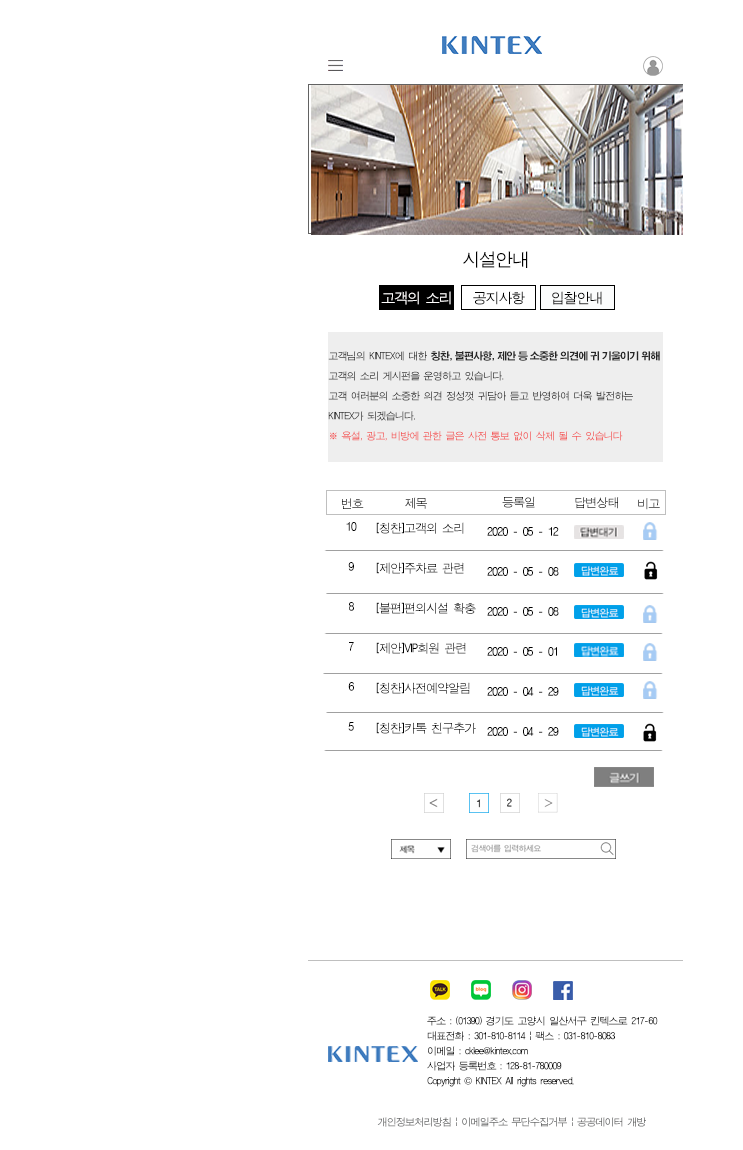
<style>
.page{position:relative;width:743px;height:1150px;background:#ffffff}
.page>*{position:absolute;margin:0}
.t1{font:18px "ÈÞ¸Õ°íµñ";letter-spacing:-0.08em;color:#010101}
.t2{font:14px "ÈÞ¸Õ°íµñ";letter-spacing:-0.08em;color:#fdfcfc}
.t3{font:14px "ÈÞ¸Õ°íµñ";letter-spacing:-0.08em;color:#010101}
.t4{font:14px "ÈÞ¸Õ°íµñ";letter-spacing:-0.08em;color:#000000}
.t5{font:10px/20px "ÈÞ¸Õ°íµñ";letter-spacing:-0.08em;color:#262626}
.t6{font:10px/20px "H2gtrE";letter-spacing:-0.08em;color:#262626}
.t7{font:10px/20px "ÈÞ¸Õ°íµñ";letter-spacing:-0.08em;color:#f35454}
.t8{font:12px "ÈÞ¸Õ°íµñ";letter-spacing:-0.08em}
.t9{font:12px/40px "ÈÞ¸Õ°íµñ";letter-spacing:-0.08em;color:#000000}
.t10{font:10px/15px "ÈÞ¸Õ°íµñ";letter-spacing:-0.08em;color:#020202}
.t11{font:10px/15px "Gulim";letter-spacing:-0.08em;color:#020202}
.t12{font:10px "ÈÞ¸Õ°íµñ";letter-spacing:-0.08em}
</style>
<div class="page">
<p class="t1" style="left:463px;top:251px;width:65px;height:17px">시설안내</p>
<p class="t2" style="left:381px;top:291px;width:70px;height:14px">고객의 소리</p>
<p class="t3" style="left:473px;top:291px;width:52px;height:14px">공지사항</p>
<p class="t4" style="left:552px;top:291px;width:50px;height:14px">입찰안내</p>
<p class="t5" style="left:328px;top:351px;width:332px;height:90px">고객님의 KINTEX에 대한 <span class="t6">칭찬, 불편사항, 제안 등 소중한 의견에 귀 기울이기 위해 <br></span>고객의 소리 게시펀을 운영하고 있습니다.<br>고객 여러분의 소중한 의견 정성껏 귀담아 듣고 반영하여 더욱 발전하는 <br>KINTEX가 되겠습니다.<br><span class="t7">※ 욕설, 광고, 비방에 관한 글은 사전 통보 없이 삭제 될 수 있습니다</span></p>
<p class="t8" style="left:405px;top:497px;width:22px;height:12px">제목</p>
<p class="t8" style="left:502px;top:496px;width:33px;height:12px">등록일</p>
<p class="t8" style="left:575px;top:497px;width:44px;height:12px">답변상태</p>
<p class="t8" style="left:342px;top:498px;width:22px;height:11px">번호</p>
<p class="t8" style="left:638px;top:498px;width:22px;height:12px">비고</p>
<p class="t9" style="left:346px;top:522px;width:11px;height:209px;text-align:center">10<br>9<br>8<br>7<br>6<br>5</p>
<p class="t9" style="left:376px;top:522px;width:100px;height:212px">[칭찬]고객의 소리<br>[제안]주차료 관련<br>[불편]편의시설 확충<br>[제안]VIP회원 관련<br>[칭찬]사전예약알림<br>[칭찬]카톡 친구추가</p>
<p class="t9" style="left:487px;top:527px;width:72px;height:209px">2020 - 05 - 12<br>2020 - 05 - 08<br>2020 - 05 - 08<br>2020 - 05 - 01<br>2020 - 04 - 29<br>2020 - 04 - 29</p>
<p class="t10" style="left:427px;top:1016px;width:231px;height:71px">주소 : (01390) 경기도 고양시 일산서구 킨텍스로 217-60<br>대표전화 : 301-810-8114 | 팩스 : 031-810-8083<br>이메일 : cklee@kintex.com <br>사업자 등록번호 : 128-81-780009<br>Copyright <span class="t11">©</span> KINTEX All rights reserved.</p>
<p class="t12" style="left:377px;top:1117px;width:269px;height:10px">개인정보처리방침 | 이메일주소 무단수집거부 | 공공데이터 개방</p>
</div>
